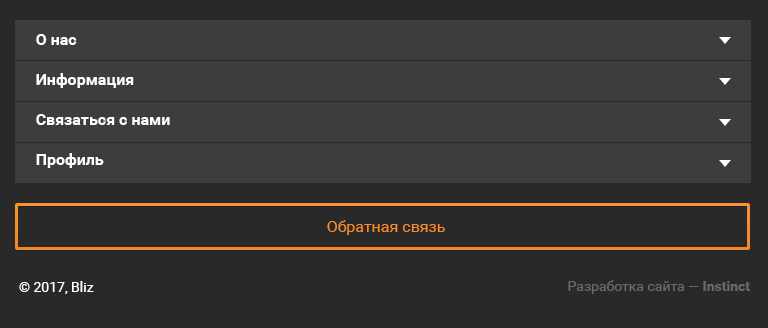
<style>
.page{position:relative;width:768px;height:328px;background:#292929}
.page>*{position:absolute;margin:0}
.t1{font:16px/40px "Roboto-Bold";color:#ffffff}
.t2{font:16px "Roboto-Regular";color:#f68d2b}
.t3{font:14px "Roboto-Regular";color:#ffffff}
.t4{font:14px "Roboto-Regular";color:#696969}
.t5{font:14px "Roboto-Bold";color:#696969}
</style>
<div class="page">
<p class="t1" style="left:36px;top:34px;width:134px;height:134px">О нас<br>Информация<br>Связаться с нами<br>Профиль</p>
<p class="t2" style="left:327px;top:220px;width:118px;height:15px">Обратная связь</p>
<p class="t3" style="left:19px;top:281px;width:75px;height:13px">© 2017, Bliz</p>
<p class="t4" style="left:568px;top:280px;width:182px;height:14px">Разработка сайта — <span class="t5">Instinct</span></p>
</div>
